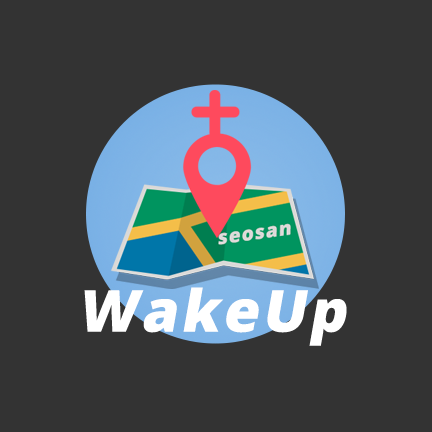
<style>
.page{position:relative;width:432px;height:432px;background:#333333}
.page>*{position:absolute;margin:0}
.t1{font:58px "NotoSans-Black";letter-spacing:0.06em;color:#ffffff;font-style:italic}
</style>
<div class="page">
<p class="t1" style="left:84px;top:287px;width:263px;height:59px">WakeUp</p>
</div>
